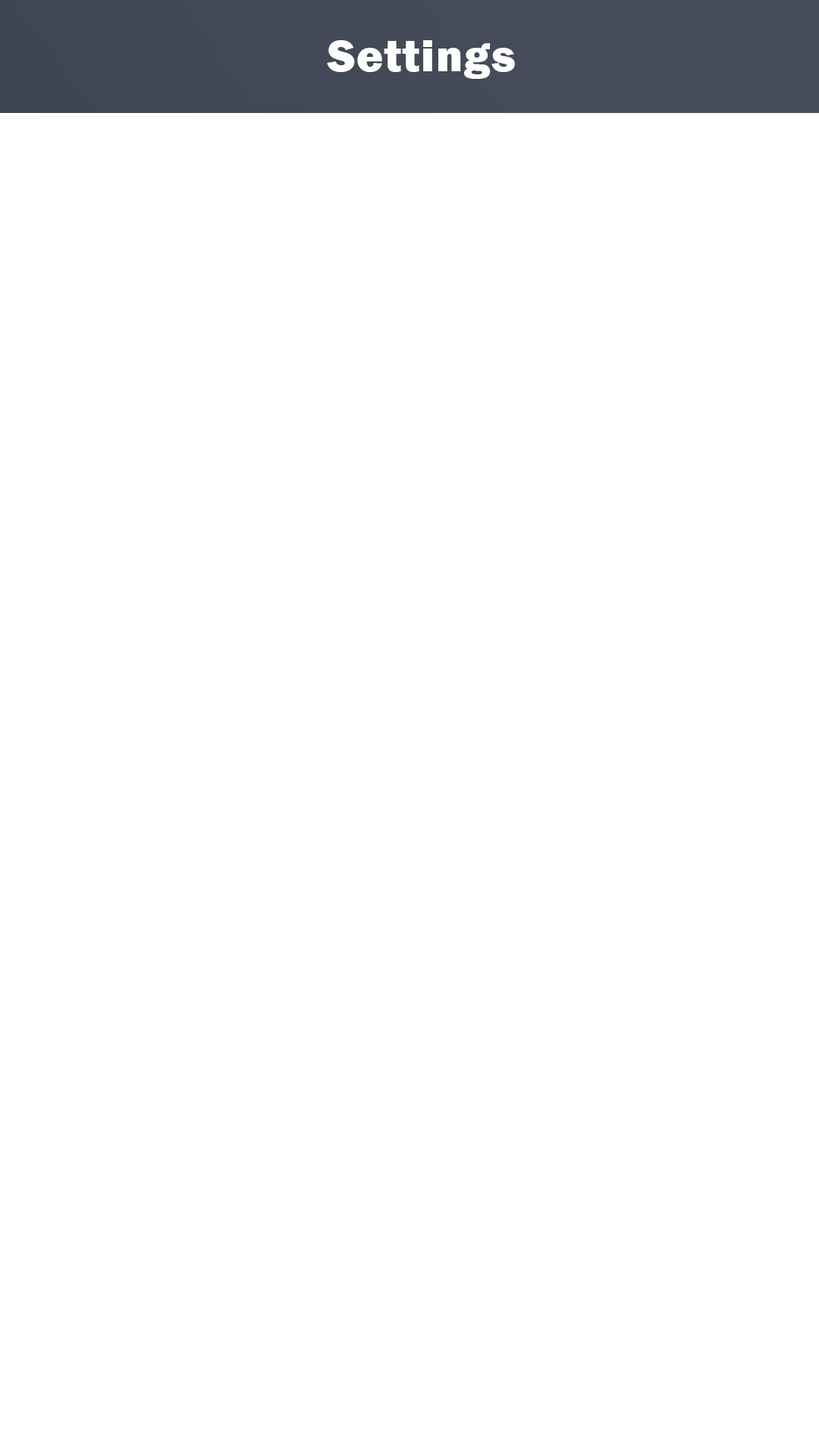
<style>
.page{position:relative;width:819px;height:1456px;background:#ffffff}
.page>*{position:absolute;margin:0}
.t1{font:45.5px "FranklinGothic-Heavy";letter-spacing:0.03em;color:#ffffff}
</style>
<div class="page">
<p class="t1" style="left:327px;top:40px;width:188px;height:39px">Settings</p>
</div>
